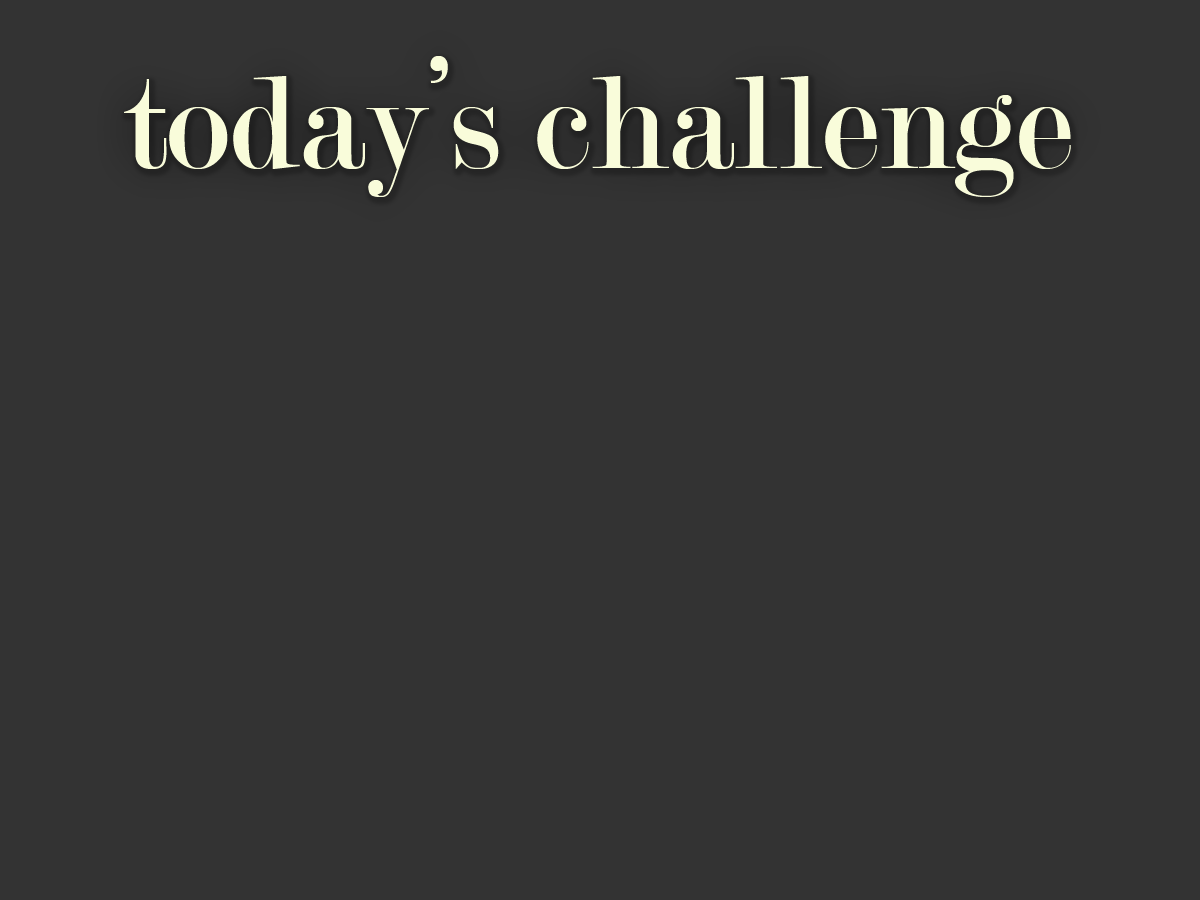
<style>
.page{position:relative;width:1200px;height:900px;background:#333333}
.page>*{position:absolute;margin:0}
.t1{font:141.1px "Modern-Regular";color:#f9fcda}
</style>
<div class="page">
<p class="t1" style="left:124px;top:56px;width:947px;height:141px">today’s challenge</p>
</div>
